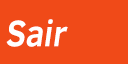
<style>
.page{position:relative;width:128px;height:64px;background:#f04a18}
.page>*{position:absolute;margin:0}
.t1{font:37.8px "FogSansIt";color:#ffffff;scale:0.87 1}
</style>
<div class="page">
<p class="t1" style="left:6px;top:19px;width:62px;height:28px">Sair</p>
</div>
